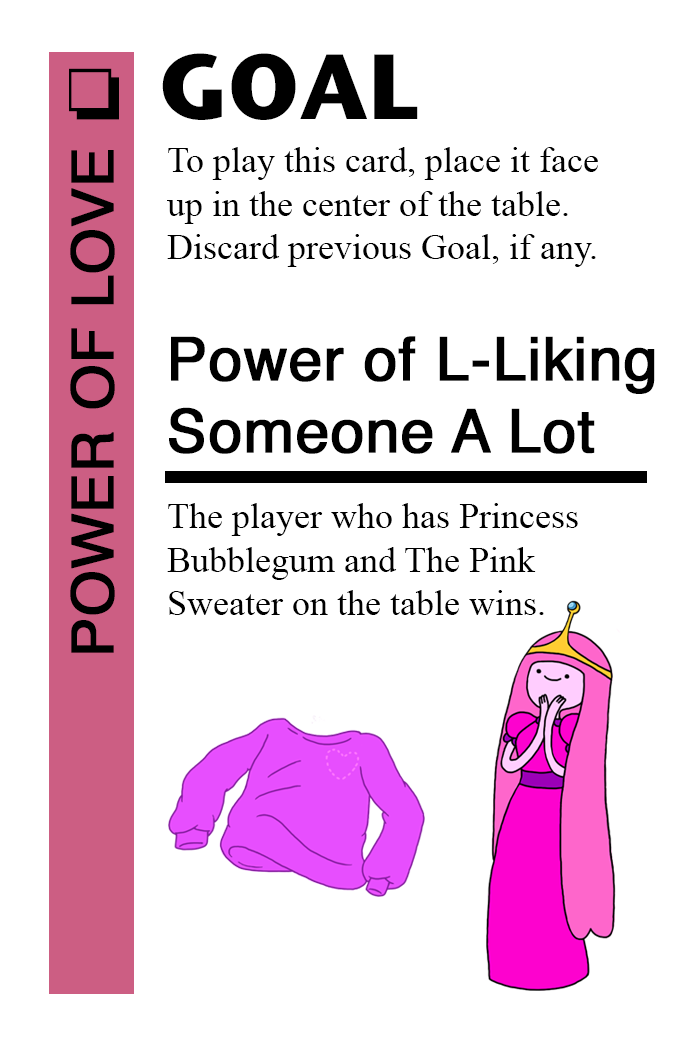
<style>
.page{position:relative;width:700px;height:1042px;background:#ffffff}
.page>*{position:absolute;margin:0}
.t1{font:92px "StoneSansITC-Bold";color:#000000}
.t2{font:72px "MS-Gothic";color:#000000}
.t3{font:58px "Helvetica";color:#000000;font-weight:bold}
.t4{font:36px "TimesNewRomanPSMT";color:#000000}
.t5{font:60px "Helvetica";color:#000000;font-weight:bold}
</style>
<div class="page">
<p class="t1" style="left:162px;top:53px;width:256px;height:67px">GOAL</p>
<p class="t2" style="left:69px;top:68px;width:50px;height:52px">❏</p>
<p class="t3" style="left:70px;top:150px;width:45px;height:503px;rotate:-90deg">POWER OF LOVE</p>
<p class="t4" style="left:167px;top:147px;width:431px;height:120px">To play this card, place it face<br>up in the center of the table.<br>Discard previous Goal, if any.</p>
<p class="t5" style="left:169px;top:336px;width:486px;height:118px">Power of L-Liking<br>Someone A Lot</p>
<p class="t4" style="left:167px;top:503px;width:411px;height:112px">The player who has Princess <br>Bubblegum and The Pink<br>Sweater on the table wins.</p>
</div>
